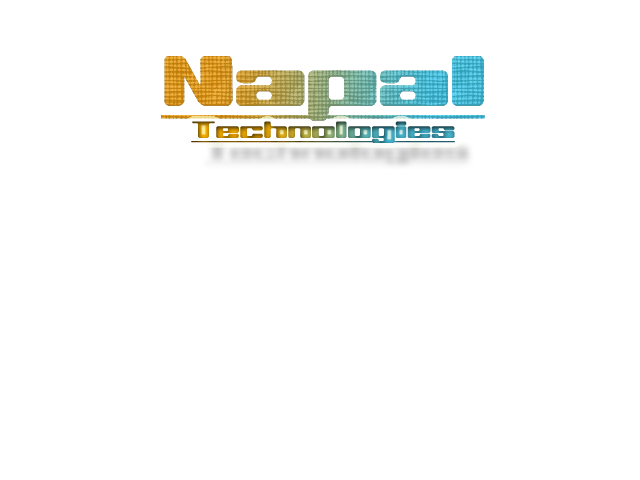
<style>
.page{position:relative;width:640px;height:480px;background:#ffffff}
.page>*{position:absolute;margin:0}
.t1{font:72px "OffKilterRBRK";text-decoration:underline}
.t2{font:24px "OffKilterRBRK";text-decoration:underline}
</style>
<div class="page">
<p class="t1" style="left:161px;top:56px;width:324px;height:65px">Napal</p>
<p class="t1" style="left:161px;top:56px;width:324px;height:65px">Napal</p>
<p class="t2" style="left:191px;top:121px;width:264px;height:22px">Technologies</p>
</div>
